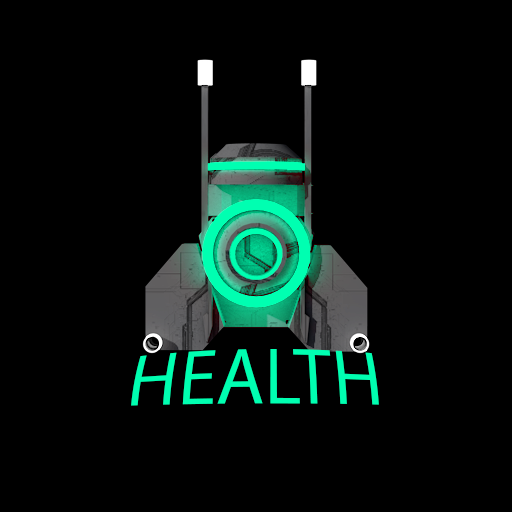
<style>
.page{position:relative;width:512px;height:512px;background:#000000}
.page>*{position:absolute;margin:0}
.t1{font:72px "MyriadPro-Regular";color:#00ffb1}
</style>
<div class="page">
<p class="t1" style="left:131px;top:349px;width:248px;height:57px">HEALTH</p>
</div>
